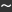
<style>
.page{position:relative;width:12px;height:12px;background:#333333}
.page>*{position:absolute;margin:0}
.t1{font:21.3px "Avenir-Book";letter-spacing:-0.01em;color:#ffffff}
</style>
<div class="page">
<p class="t1" style="left:1px;top:4px;width:11px;height:3px">~</p>
</div>
